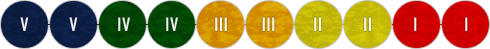
<style>
.page{position:relative;width:490px;height:49px}
.page>*{position:absolute;margin:0}
.t1{font:21.2px "Bombardier";letter-spacing:0.06em;color:#ffffff;scale:0.8 1}
.t2{font:21.2px "Bombardier";letter-spacing:0.06em;color:#e6ede6;scale:0.8 1}
.t3{font:21.2px "Bombardier";letter-spacing:0.06em;color:#fbf5e6;scale:0.8 1}
.t4{font:21.2px "Bombardier";letter-spacing:0.06em;color:#fae6e6;scale:0.8 1}
</style>
<div class="page">
<p class="t1" style="left:20px;top:17px;width:9px;height:15px">V</p>
<p class="t1" style="left:69px;top:17px;width:9px;height:15px">V</p>
<p class="t2" style="left:118px;top:17px;width:12px;height:15px">IV</p>
<p class="t2" style="left:166px;top:17px;width:12px;height:15px">IV</p>
<p class="t3" style="left:215px;top:17px;width:12px;height:15px">III</p>
<p class="t3" style="left:262px;top:17px;width:13px;height:15px">III</p>
<p class="t1" style="left:314px;top:17px;width:8px;height:15px">II</p>
<p class="t1" style="left:364px;top:17px;width:8px;height:15px">II</p>
<p class="t4" style="left:414px;top:17px;width:3px;height:15px">I</p>
<p class="t4" style="left:465px;top:17px;width:3px;height:15px">I</p>
</div>
